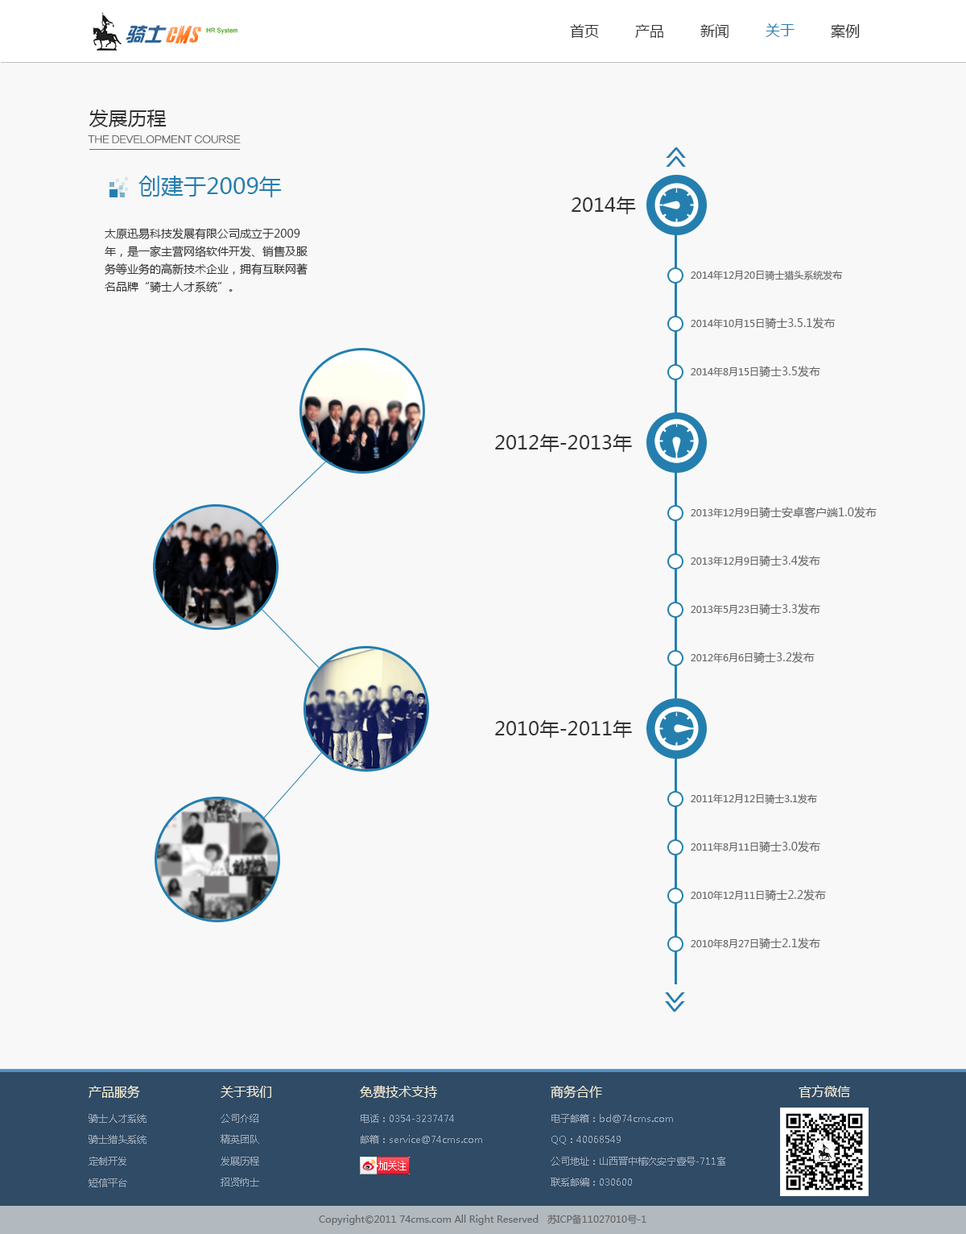
<style>
.page{position:relative;width:966px;height:1234px;background:#f8f8f8}
.page>*{position:absolute;margin:0}
.t1{font:14.5px "MicrosoftYaHei";color:#333333}
.t2{font:14.5px "MicrosoftYaHei";color:#247faf}
.t3{font:19.3px "MicrosoftYaHei";color:#333333}
.t4{font:9.7px "FZLTCXHJW--GB1-0";letter-spacing:-0.05em;color:#666666;font-weight:bold}
.t5{font:38.7px "MicrosoftYaHei";letter-spacing:-0.37em;color:#247faf;scale:0.6 1}
.t6{font:22.6px "MicrosoftYaHei";color:#247faf}
.t7{font:11.3px/17.7px "MicrosoftYaHei";color:#333333}
.t8{font:9.7px "MicrosoftYaHei";color:#666666}
.t9{font:11.3px "MicrosoftYaHei";color:#666666}
.t10{font:12.9px "MicrosoftYaHei";color:#f6eed7}
.t11{font:9.7px "MicrosoftYaHei";color:#9da9b7}
</style>
<div class="page">
<p class="t1" style="left:570px;top:24px;width:29px;height:14px">首页</p>
<p class="t1" style="left:635px;top:24px;width:29px;height:14px">产品</p>
<p class="t1" style="left:701px;top:24px;width:28px;height:14px">新闻</p>
<p class="t2" style="left:766px;top:23px;width:29px;height:14px">关于</p>
<p class="t1" style="left:831px;top:24px;width:29px;height:15px">案例</p>
<p class="t3" style="left:89px;top:110px;width:78px;height:17px">发展历程</p>
<p class="t4" style="left:88px;top:134px;width:153px;height:9px">THE DEVELOPMENT COURSE</p>
<p class="t5" style="left:666px;top:147px;width:20px;height:20px;rotate:-90deg">&gt;&gt;</p>
<p class="t6" style="left:139px;top:176px;width:143px;height:21px">创建于2009年</p>
<p class="t3" style="left:572px;top:197px;width:64px;height:17px">2014年</p>
<p class="t7" style="left:105px;top:228px;width:203px;height:64px">太原迅易科技发展有限公司成立于2009年，是一家主营网络软件开发、销售及服务等业务的高新技术企业，拥有互联网著名品牌“骑士人才系统”。</p>
<p class="t8" style="left:691px;top:270px;width:152px;height:10px">2014年12月20日骑士猎头系统发布</p>
<p class="t8" style="left:691px;top:317px;width:145px;height:12px">2014年10月15日<span class="t9">骑士3.5.1发布</span></p>
<p class="t8" style="left:691px;top:366px;width:130px;height:11px">2014年8月15日<span class="t9">骑士3.5发布</span></p>
<p class="t3" style="left:495px;top:434px;width:137px;height:18px">2012年-2013年</p>
<p class="t9" style="left:691px;top:507px;width:186px;height:11px"><span class="t8">2013年12月9日</span>骑士安卓客户端1.0发布</p>
<p class="t8" style="left:691px;top:555px;width:130px;height:11px">2013年12月9日<span class="t9">骑士3.4发布</span></p>
<p class="t8" style="left:691px;top:603px;width:130px;height:11px">2013年5月23日<span class="t9">骑士3.3发布</span></p>
<p class="t8" style="left:691px;top:652px;width:124px;height:11px">2012年6月6日<span class="t9">骑士3.2发布</span></p>
<p class="t3" style="left:495px;top:720px;width:137px;height:18px">2010年-2011年</p>
<p class="t8" style="left:691px;top:793px;width:126px;height:11px">2011年12月12日骑士3.1发布</p>
<p class="t8" style="left:691px;top:841px;width:130px;height:11px">2011年8月11日<span class="t9">骑士3.0发布</span></p>
<p class="t8" style="left:691px;top:889px;width:135px;height:11px">2010年12月11日<span class="t9">骑士2.2发布</span></p>
<p class="t8" style="left:691px;top:937px;width:130px;height:12px">2010年8月27日<span class="t9">骑士2.1发布</span></p>
<p class="t5" style="left:665px;top:992px;width:20px;height:20px;rotate:90deg">&gt;&gt;</p>
<p class="t10" style="left:89px;top:1085px;width:51px;height:14px">产品服务</p>
<p class="t10" style="left:221px;top:1086px;width:50px;height:12px">关于我们</p>
<p class="t10" style="left:360px;top:1085px;width:77px;height:14px">免费技术支持</p>
<p class="t10" style="left:551px;top:1085px;width:51px;height:14px">商务合作</p>
<p class="t10" style="left:799px;top:1085px;width:51px;height:13px">官方微信</p>
<p class="t11" style="left:89px;top:1114px;width:58px;height:9px">骑士人才系统</p>
<p class="t11" style="left:221px;top:1114px;width:38px;height:9px">公司介绍</p>
<p class="t11" style="left:361px;top:1114px;width:93px;height:9px">电话：0354-3237474</p>
<p class="t11" style="left:552px;top:1114px;width:121px;height:9px">电子邮箱：bd@74cms.com</p>
<p class="t11" style="left:221px;top:1134px;width:38px;height:10px">精英团队</p>
<p class="t11" style="left:89px;top:1135px;width:58px;height:9px">骑士猎头系统</p>
<p class="t11" style="left:361px;top:1135px;width:121px;height:9px">邮箱：service@74cms.com</p>
<p class="t11" style="left:552px;top:1136px;width:69px;height:8px">QQ：40068549</p>
<p class="t11" style="left:89px;top:1157px;width:37px;height:8px">定制开发</p>
<p class="t11" style="left:221px;top:1157px;width:38px;height:8px">发展历程</p>
<p class="t11" style="left:551px;top:1157px;width:175px;height:8px">公司地址：山西晋中榆次安宁壹号-711室</p>
<p class="t11" style="left:89px;top:1178px;width:38px;height:9px">短信平台</p>
<p class="t11" style="left:221px;top:1177px;width:38px;height:9px">招贤纳士</p>
<p class="t11" style="left:551px;top:1177px;width:81px;height:9px">联系邮编：030600</p>
<p class="t8" style="left:319px;top:1214px;width:328px;height:11px">Copyright©2011 74cms.com All Right Reserved   苏ICP备11027010号-1</p>
</div>
